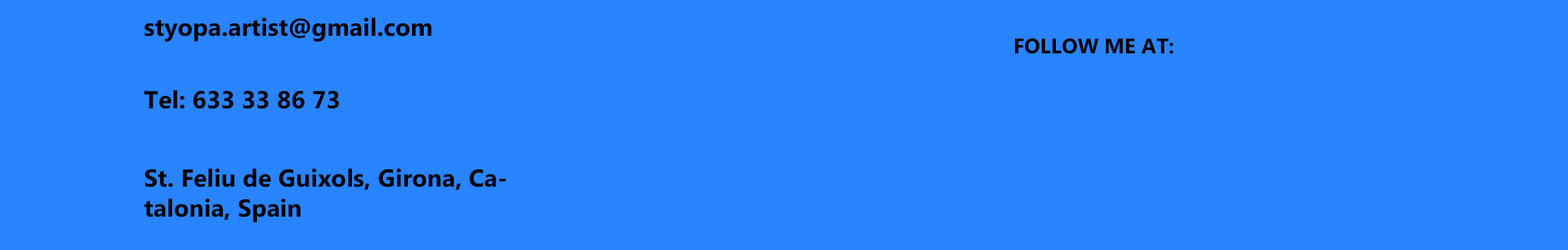
<style>
.page{position:relative;width:1568px;height:250px;background:#2984ff}
.page>*{position:absolute;margin:0}
.t1{font:24.7px "MicrosoftPhagsPa-Bold";color:#000000}
.t2{font:21px "MicrosoftPhagsPa-Bold";color:#000000}
</style>
<div class="page">
<p class="t1" style="left:144px;top:18px;width:288px;height:24px">styopa.artist@gmail.com</p>
<p class="t2" style="left:1015px;top:38px;width:158px;height:16px">FOLLOW ME AT:</p>
<p class="t1" style="left:144px;top:90px;width:195px;height:19px">Tel: 633 33 86 73</p>
<p class="t1" style="left:144px;top:168px;width:362px;height:55px">St. Feliu de Guixols, Girona, Catalonia, Spain</p>
</div>
